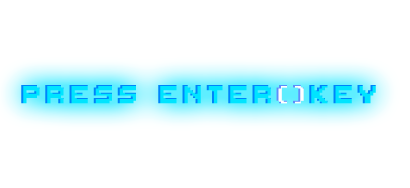
<style>
.page{position:relative;width:410px;height:188px;background:#ffffff}
.page>*{position:absolute;margin:0}
.t1{font:41.7px "ThaleahFat";letter-spacing:0.08em;color:#00e4ff}
.t2{font:41.7px "ThaleahFat";letter-spacing:0.08em;color:#ffffff}
</style>
<div class="page">
<p class="t1" style="left:21px;top:85px;width:355px;height:19px">PRESS ENTER<span class="t2">()</span>KEY</p>
</div>
